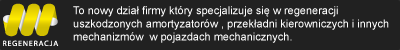
<style>
.page{position:relative;width:400px;height:50px;background:#212121}
.page>*{position:absolute;margin:0}
.t1{font:11px "ArialMT";color:#ffffff}
</style>
<div class="page">
<p class="t1" style="left:73px;top:6px;width:316px;height:37px">To nowy dział firmy który specjalizuje się w regeneracji <br>uszkodzonych amortyzatorów , przekładni kierowniczych i innych<br>mechanizmów  w pojazdach mechanicznych.</p>
</div>
